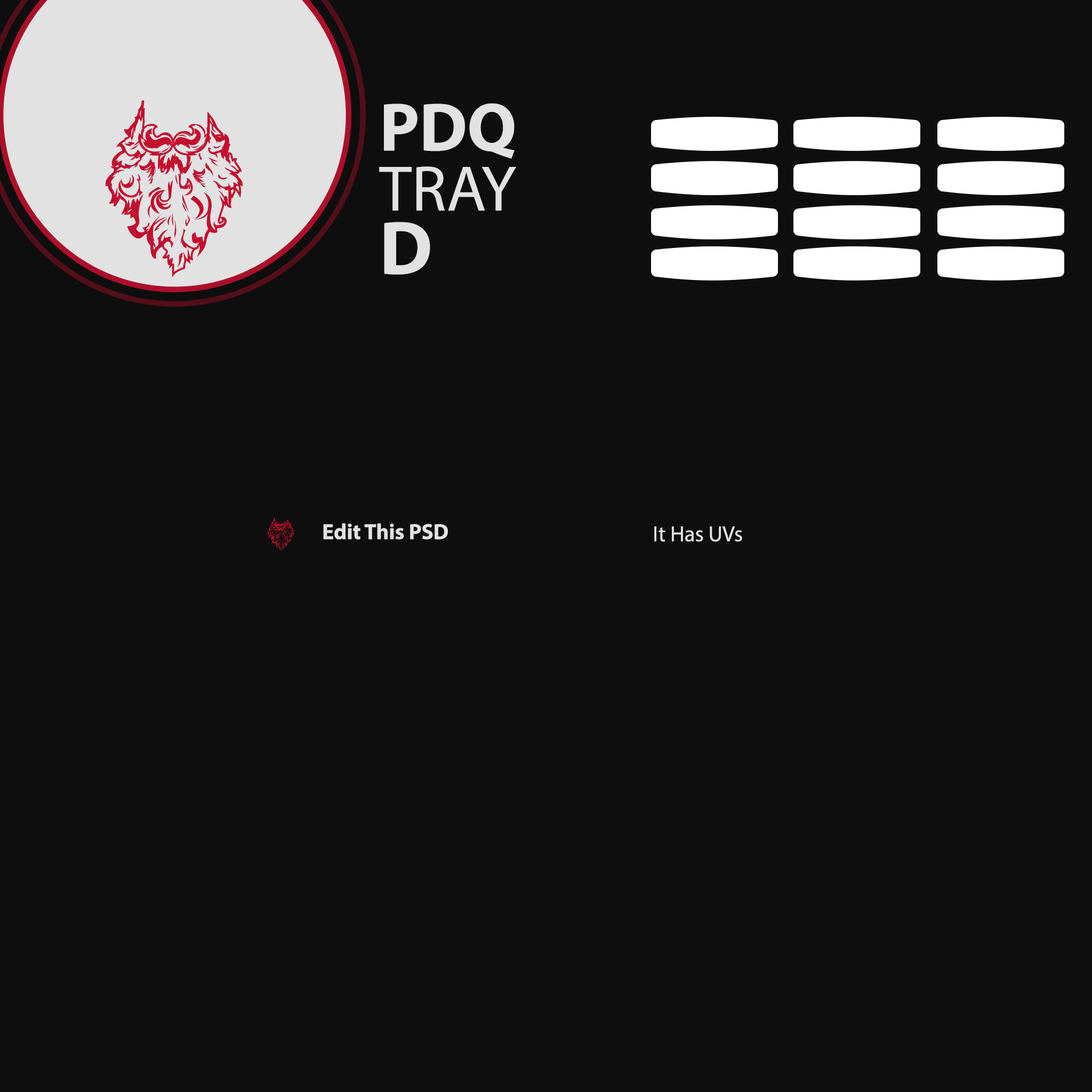
<style>
.page{position:relative;width:1092px;height:1092px;background:#0e0e0e}
.page>*{position:absolute;margin:0}
.t1{font:64.7px/60px "MyriadPro-Regular";color:#e2e2e2}
.t2{font:68.7px/59.3px "MyriadPro-Bold";color:#e2e2e2}
.t3{font:76.2px/63.4px "MyriadPro-Bold";color:#e2e2e2}
.t4{font:21.9px "MyriadPro-Bold";color:#e2e2e2}
.t5{font:21.9px "MyriadPro-Regular";color:#e2e2e2}
</style>
<div class="page">
<p class="t1" style="left:379px;top:103px;width:137px;height:172px"><span class="t2">PDQ<br></span>TRAY<br><span class="t3">D</span></p>
<p class="t4" style="left:323px;top:523px;width:125px;height:17px">Edit This PSD</p>
<p class="t5" style="left:654px;top:526px;width:88px;height:16px">It Has UVs</p>
</div>
